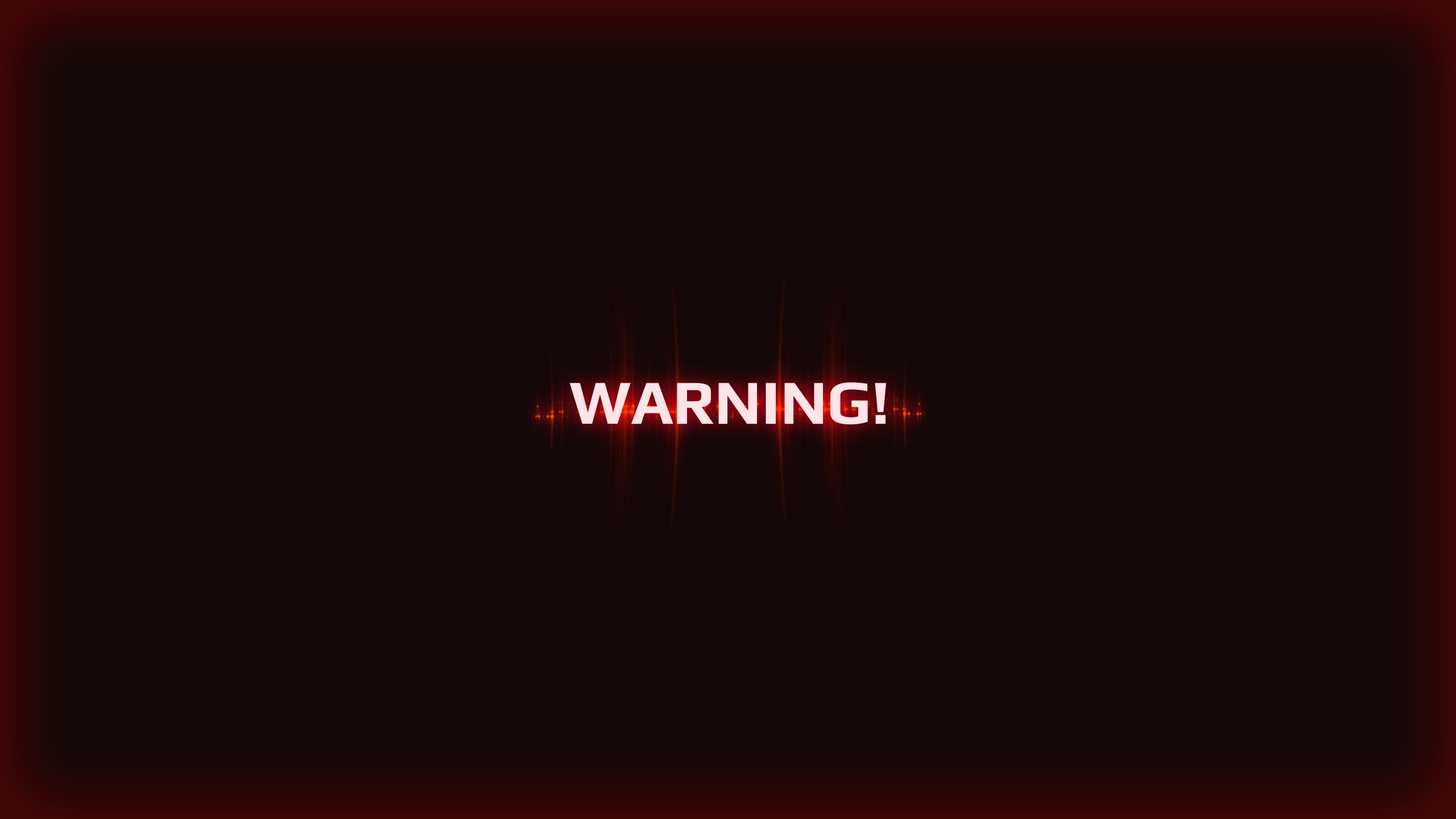
<style>
.page{position:relative;width:1456px;height:819px;background:#130707}
.page>*{position:absolute;margin:0}
.t1{font:62.6px "Play-Bold";color:#ffe4e7}
</style>
<div class="page">
<p class="t1" style="left:569px;top:382px;width:317px;height:43px">WARNING!</p>
</div>
